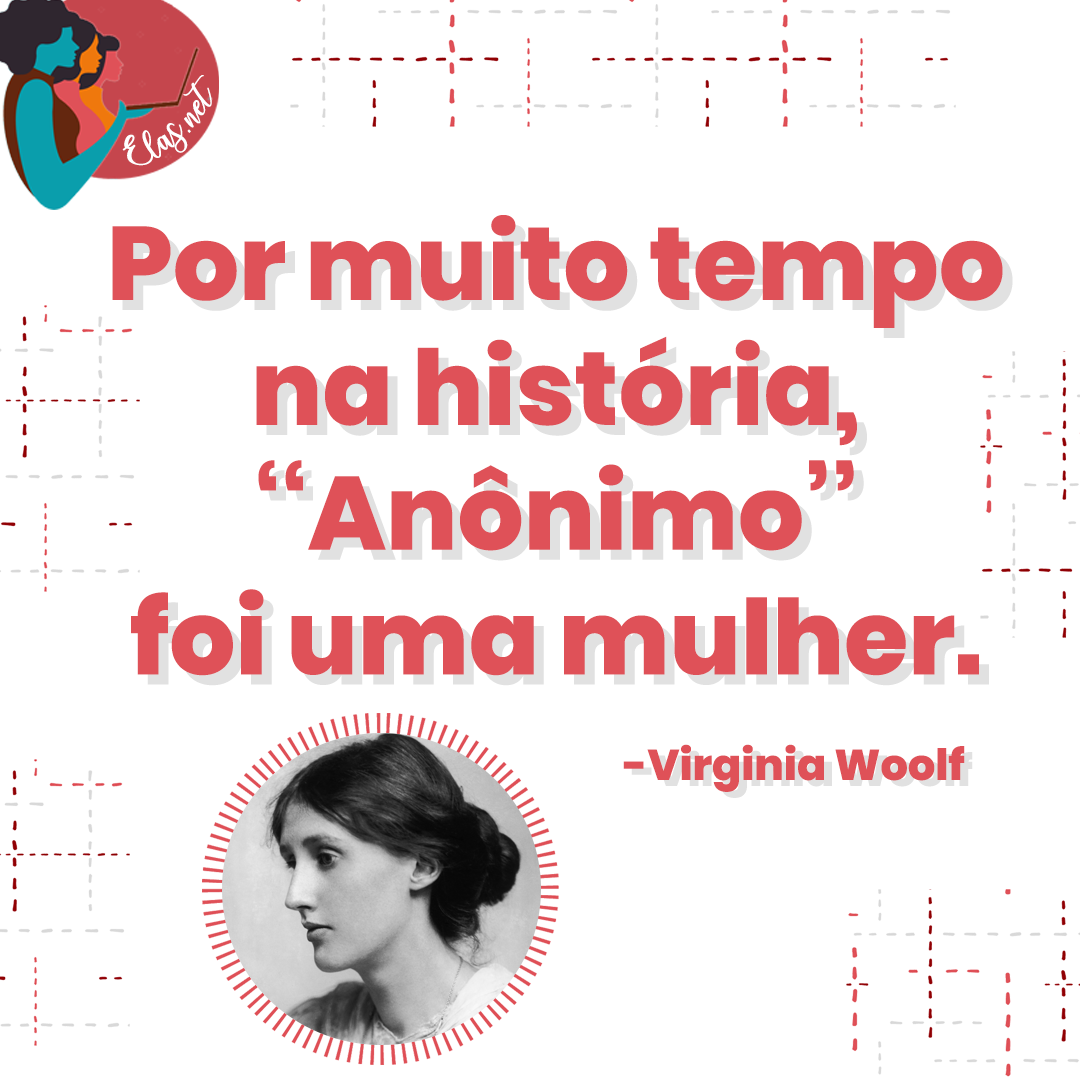
<style>
.page{position:relative;width:1080px;height:1080px;background:#ffffff}
.page>*{position:absolute;margin:0}
.t1{font:25.7px "charlinda-Regular";color:#ffffff;scale:1.18 1}
.t2{font:104px "Poppins-ExtraBold";color:#df5158}
.t3{font:104px "Poppins-ExtraBold"}
.t4{font:43px "Poppins-ExtraBold";color:#df5158}
.t5{font:43px "Poppins-ExtraBold"}
</style>
<div class="page">
<p class="t1" style="left:122px;top:75px;width:90px;height:91px;rotate:-43deg">Elas.net</p>
<p class="t2" style="left:112px;top:215px;width:891px;height:461px;text-align:center">Por muito tempo<br>na história,<br>‘‘Anônimo’’<br>foi uma mulher.</p>
<p class="t3" style="left:122px;top:225px;width:891px;height:461px;text-align:center">Por muito tempo<br>na história,<br>‘‘Anônimo’’<br>foi uma mulher.</p>
<p class="t4" style="left:623px;top:744px;width:342px;height:48px">-Virginia Woolf</p>
<p class="t5" style="left:631px;top:750px;width:342px;height:48px">-Virginia Woolf</p>
</div>
